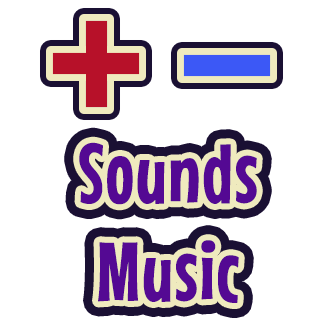
<style>
.page{position:relative;width:320px;height:320px;background:#ffffff}
.page>*{position:absolute;margin:0}
.t1{font:83.3px "MouseMemoirs-Regular";color:#540993;font-weight:bold}
</style>
<div class="page">
<p class="t1" style="left:79px;top:142px;width:178px;height:63px">Sounds</p>
<p class="t1" style="left:98px;top:240px;width:141px;height:63px">Music</p>
</div>
